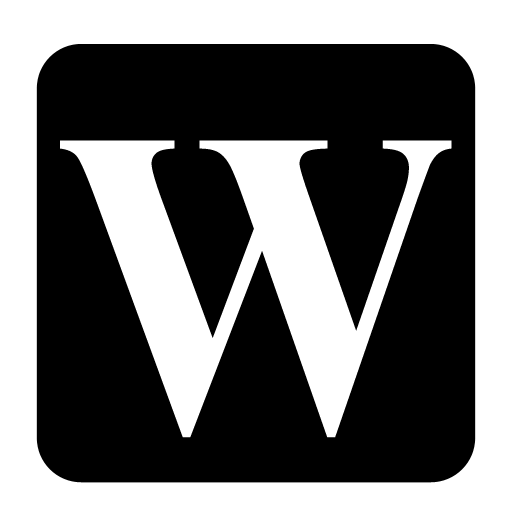
<style>
.page{position:relative;width:512px;height:512px;background:#000000}
.page>*{position:absolute;margin:0}
.t1{font:438px "TimesNewRomanPS-BoldMT";color:#ffffff;scale:0.91 1}
</style>
<div class="page">
<p class="t1" style="left:60px;top:140px;width:392px;height:298px">W</p>
</div>
